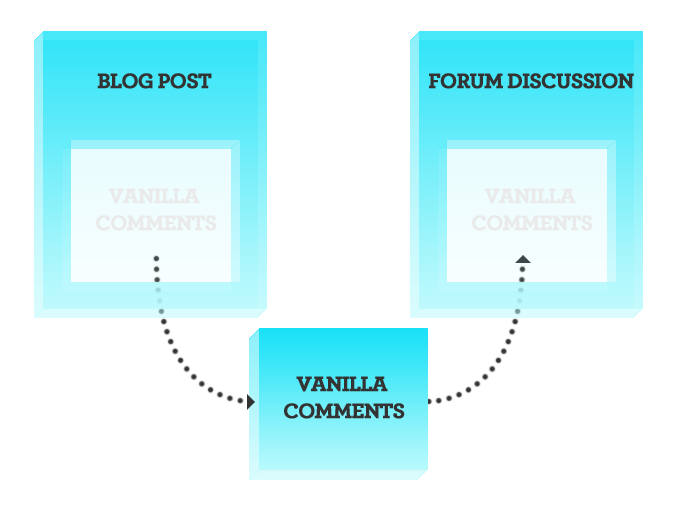
<style>
.page{position:relative;width:677px;height:506px;background:#ffffff}
.page>*{position:absolute;margin:0}
.t1{font:22px "Archer-Bold";letter-spacing:-0.05em;color:#333333;font-weight:bold}
.t2{font:22px "Archer-Bold";letter-spacing:-0.05em;color:#eaeaea;font-weight:bold}
</style>
<div class="page">
<p class="t1" style="left:97px;top:73px;width:115px;height:16px">BLOG POST</p>
<p class="t1" style="left:429px;top:73px;width:205px;height:16px">FORUM DISCUSSION</p>
<p class="t2" style="left:96px;top:188px;width:121px;height:43px;text-align:center">VANILLA <br>COMMENTS</p>
<p class="t2" style="left:472px;top:188px;width:121px;height:43px;text-align:center">VANILLA <br>COMMENTS</p>
<p class="t1" style="left:284px;top:376px;width:121px;height:43px;text-align:center">VANILLA <br>COMMENTS</p>
</div>
